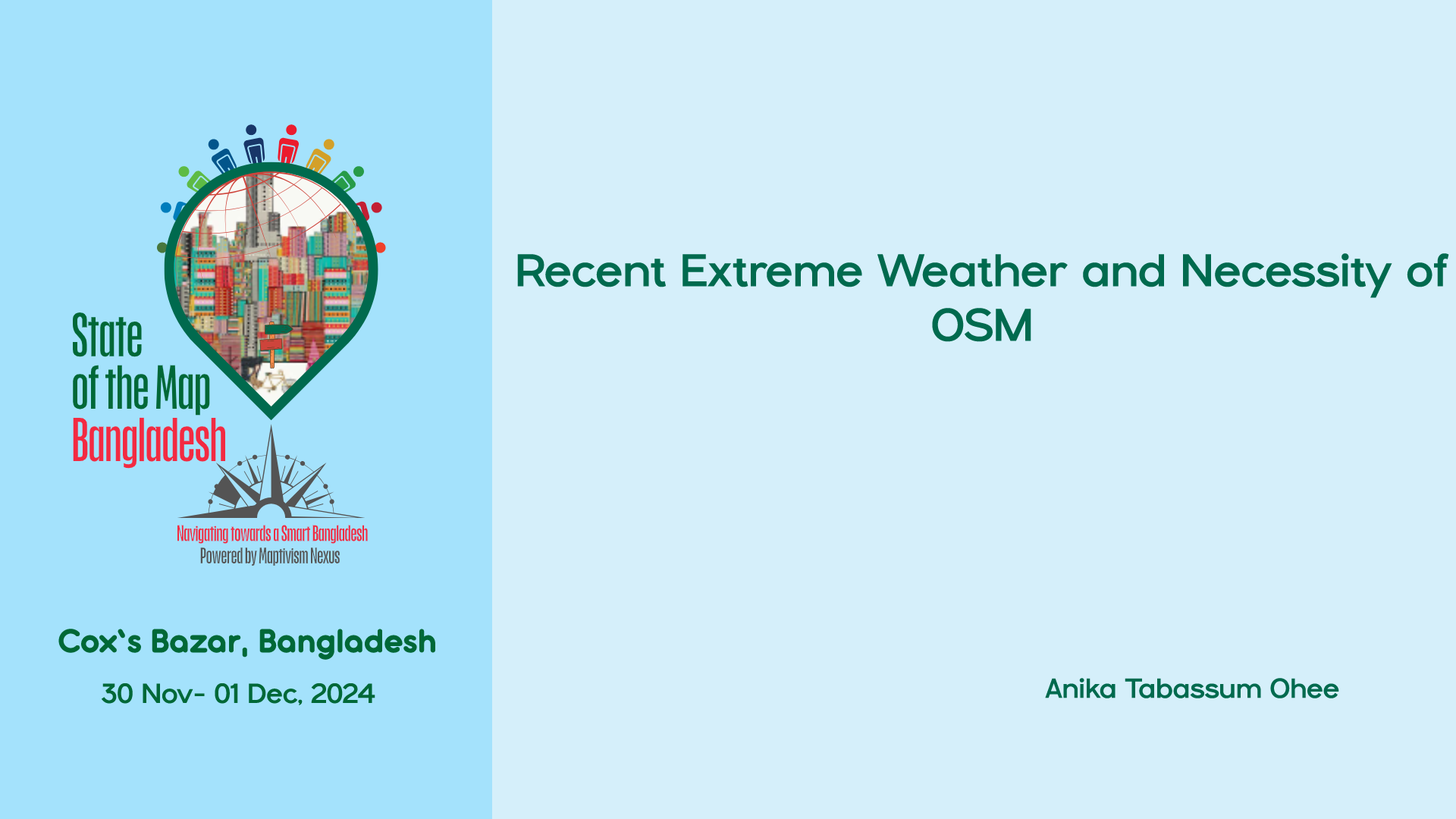
<style>
.page{position:relative;width:1456px;height:819px;background:#d5effa}
.page>*{position:absolute;margin:0}
.t1{font:45.5px "Gilgan-Regular";color:#006a4e}
.t2{font:36.4px "AntipastoPro-Bold";color:#006837}
.t3{font:27.3px "Gilgan-Regular";color:#006a4e}
.t4{font:27.3px "Gilgan-Regular";color:#006837}
</style>
<div class="page">
<p class="t1" style="left:517px;top:253px;width:932px;height:89px;text-align:center">Recent Extreme Weather and Necessity of <br>OSM</p>
<p class="t2" style="left:58px;top:629px;width:377px;height:31px">Cox’s Bazar, Bangladesh</p>
<p class="t3" style="left:1045px;top:678px;width:294px;height:20px">Anika Tabassum Ohee</p>
<p class="t4" style="left:102px;top:683px;width:273px;height:22px">30 Nov- 01 Dec, 2024</p>
</div>
